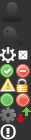
<style>
.page{position:relative;width:31px;height:140px;background:#333333}
.page>*{position:absolute;margin:0}
.t1{font:28px "Kalinga";color:#ffffff;scale:1.07 1}
.t2{font:11.6px "Verdana-Bold";color:#ffffff;scale:1.36 1}
</style>
<div class="page">
<p class="t1" style="left:0px;top:124px;width:16px;height:16px">o</p>
<p class="t2" style="left:6px;top:128px;width:4px;height:9px">!</p>
</div>
